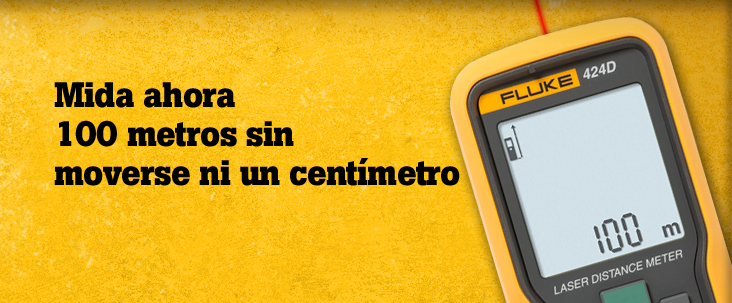
<style>
.page{position:relative;width:732px;height:303px}
.page>*{position:absolute;margin:0}
.t1{font:35px/39px "BotonPro-Bold";letter-spacing:-0.02em;color:#000000}
</style>
<div class="page">
<p class="t1" style="left:54px;top:82px;width:406px;height:104px">Mida ahora<br>100 metros sin <br>moverse ni un centímetro</p>
</div>
